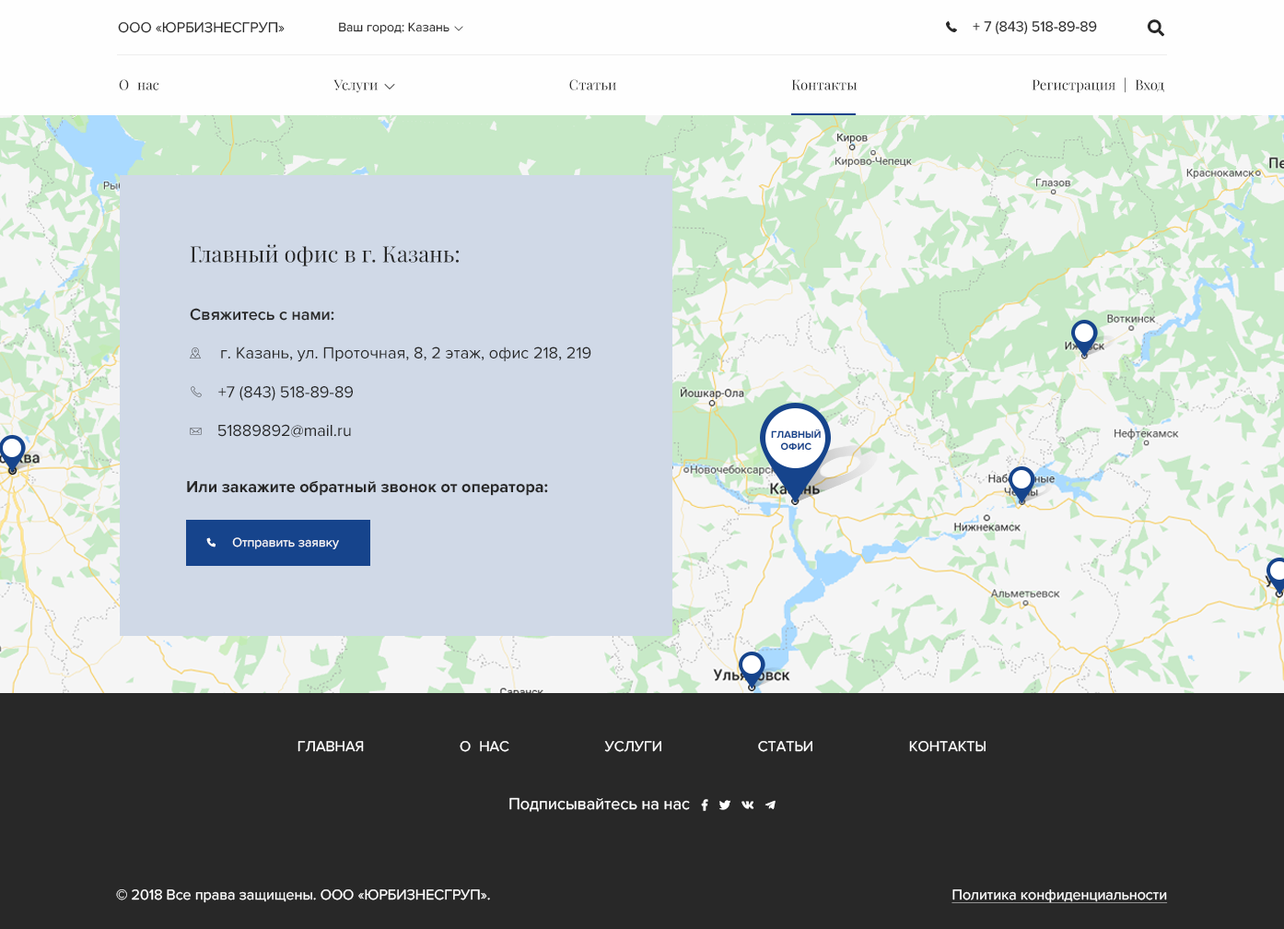
<style>
.page{position:relative;width:1284px;height:929px;background:#282828}
.page>*{position:absolute;margin:0}
.t1{font:14.7px "ProximaNova-Regular";color:#282828}
.t2{font:12.9px "ProximaNova-Regular";color:#282828}
.t3{font:14.7px "ProximaNova-Regular";color:#282828;text-transform:uppercase}
.t4{font:13.8px "PlayfairDisplay-Regular";color:#282828}
.t5{font:13.8px "PlayfairDisplay-Regular";color:#ffffff}
.t6{font:13.8px "PlayfairDisplay-Regular";color:#fefefe}
.t7{font:22.1px "PlayfairDisplay-Regular";color:#282828}
.t8{font:16.6px "ProximaNova-Semibold";color:#282828}
.t9{font:16.6px "ProximaNova-Regular";color:#282828}
.t10{font:10.1px "ProximaNova-Bold";color:#16448c;text-transform:uppercase}
.t11{font:16.6px "ProximaNova-Bold";color:#282828}
.t12{font:12.9px "ProximaNova-Regular";color:#fefefe}
.t13{font:14.7px "ProximaNova-Regular";color:#ffffff;text-transform:uppercase}
.t14{font:14.7px "ProximaNova-Regular";color:#ffffff}
.t15{font:14.7px "ProximaNova-Regular";color:#ffffff;text-decoration:underline}
</style>
<div class="page">
<p class="t1" style="left:118px;top:22px;width:167px;height:11px">ООО «ЮРБИЗНЕСГРУП»</p>
<p class="t2" style="left:339px;top:22px;width:111px;height:12px">Ваш город: Казань</p>
<p class="t3" style="left:973px;top:21px;width:124px;height:14px">+ 7 (843) 518-89-89</p>
<p class="t4" style="left:119px;top:77px;width:1045px;height:16px">О<span class="t5">_</span>нас Услуги<span class="t5">__</span> Статьи Контакты Регистрация<span class="t6">_</span>|<span class="t6">_</span>Вход</p>
<p class="t7" style="left:190px;top:244px;width:269px;height:22px">Главный офис в г. Казань:</p>
<p class="t8" style="left:190px;top:308px;width:144px;height:13px">Свяжитесь с нами:</p>
<p class="t9" style="left:221px;top:346px;width:370px;height:16px">г. Казань, ул. Проточная, 8, 2 этаж, офис 218, 219</p>
<p class="t9" style="left:218px;top:386px;width:135px;height:15px">+7 (843) 518-89-89</p>
<p class="t9" style="left:218px;top:424px;width:133px;height:14px">51889892@mail.ru</p>
<p class="t10" style="left:771px;top:429px;width:50px;height:21px;text-align:center">главный<br>офис</p>
<p class="t11" style="left:187px;top:481px;width:361px;height:15px">Или закажите обратный звонок от оператора:</p>
<p class="t12" style="left:232px;top:537px;width:107px;height:12px">Отправить заявку</p>
<p class="t13" style="left:298px;top:741px;width:688px;height:12px">Главная О<span class="t3">_</span>нас Услуги Статьи КОнтакты</p>
<p class="t14" style="left:116px;top:889px;width:374px;height:14px">© 2018 Все права защищены. ООО «ЮРБИЗНЕСГРУП».</p>
<p class="t15" style="left:952px;top:889px;width:216px;height:14px">Политика конфиденциальности</p>
</div>
